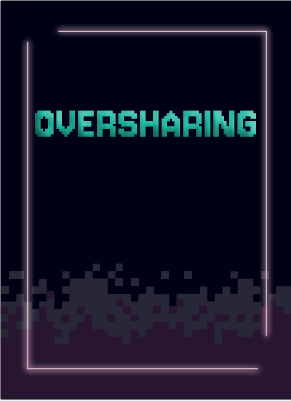
<style>
.page{position:relative;width:291px;height:401px;background:#000115}
.page>*{position:absolute;margin:0}
.t1{font:48.3px "Jersey10-Regular";letter-spacing:0.025em}
</style>
<div class="page">
<p class="t1" style="left:35px;top:110px;width:221px;height:27px">OVERSHARING</p>
</div>
